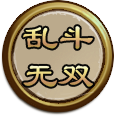
<style>
.page{position:relative;width:114px;height:116px;background:#ffffff}
.page>*{position:absolute;margin:0}
.t1{font:36px "LiSu"}
</style>
<div class="page">
<p class="t1" style="left:23px;top:26px;width:70px;height:23px">乱斗</p>
<p class="t1" style="left:23px;top:65px;width:70px;height:22px">无双</p>
</div>
